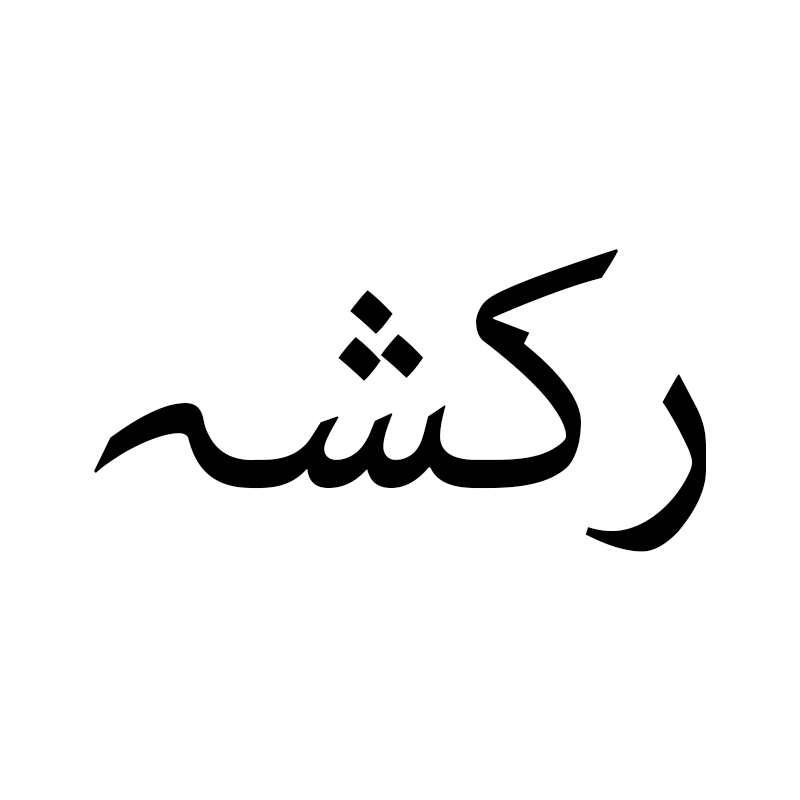
<style>
.page{position:relative;width:800px;height:800px;background:#ffffff}
.page>*{position:absolute;margin:0}
.t1{font:450px "AdobeArabic-Regular";color:#000000}
</style>
<div class="page">
<p class="t1" style="left:94px;top:249px;width:612px;height:303px">رکشہ</p>
</div>
